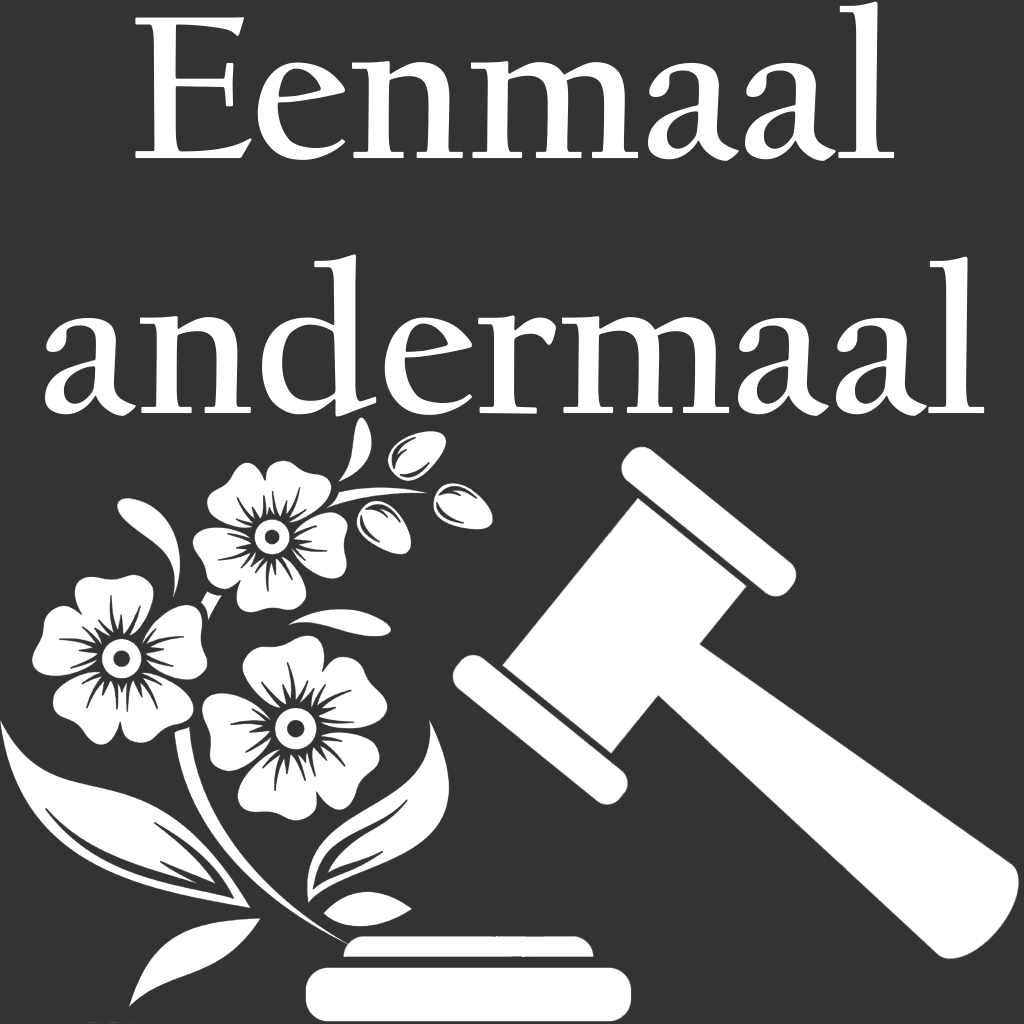
<style>
.page{position:relative;width:1024px;height:1024px;background:#333333}
.page>*{position:absolute;margin:0}
.t1{font:212px "CalifornianFB-Bold";color:#ffffff}
</style>
<div class="page">
<p class="t1" style="left:45px;top:1px;width:940px;height:416px;text-align:center">Eenmaal<br>andermaal</p>
</div>
